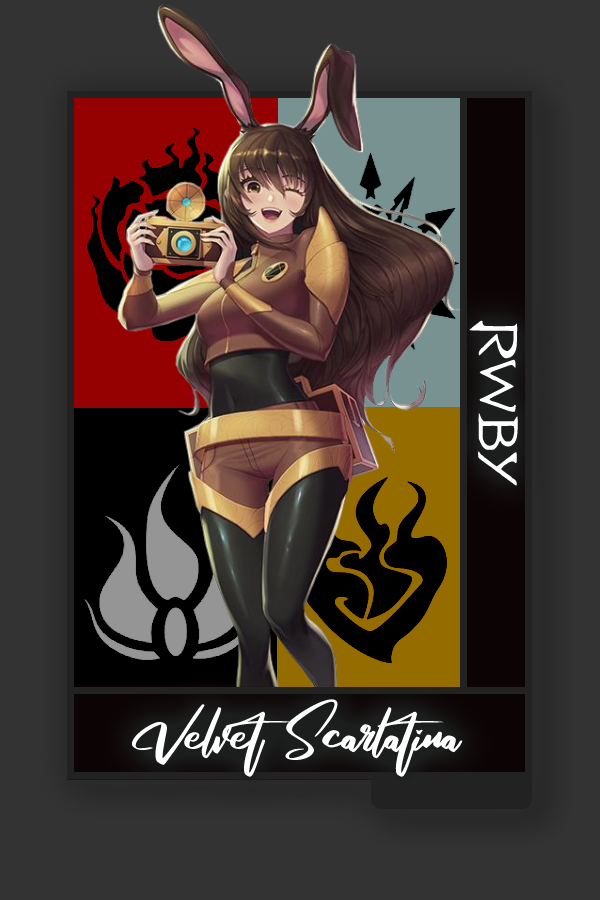
<style>
.page{position:relative;width:600px;height:900px;background:#333333}
.page>*{position:absolute;margin:0}
.t1{font:61.3px "RWBY_Style";color:#ffffff;scale:1.25 1}
.t2{font:76.6px "RosegaFREE";color:#ffffff;scale:0.91 1}
</style>
<div class="page">
<p class="t1" style="left:469px;top:320px;width:49px;height:166px;rotate:90deg">RWBY</p>
<p class="t2" style="left:130px;top:684px;width:333px;height:94px">Velvet Scarlatina</p>
</div>
